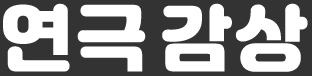
<style>
.page{position:relative;width:312px;height:76px;background:#333333}
.page>*{position:absolute;margin:0}
.t1{font:72px "Jalnan";letter-spacing:0.05em;color:#ffffff;text-transform:uppercase}
</style>
<div class="page">
<p class="t1" style="left:3px;top:3px;width:305px;height:69px">연극 감상</p>
</div>
